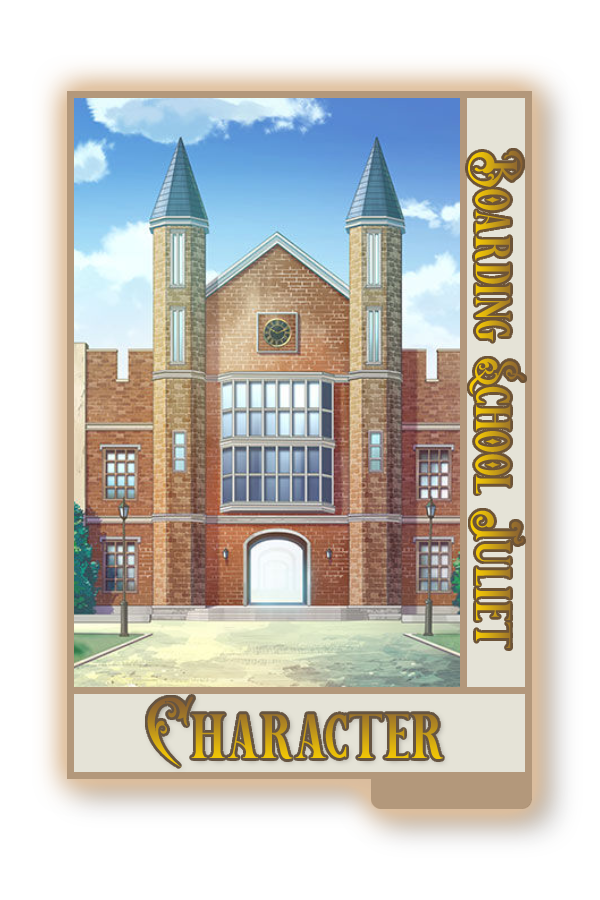
<style>
.page{position:relative;width:600px;height:900px;background:#ffffff}
.page>*{position:absolute;margin:0}
.t1{font:58.9px "VictorianDecadeDemoVersion"}
.t2{font:75px "VictorianDecadeDemoVersion"}
</style>
<div class="page">
<p class="t1" style="left:468px;top:150px;width:57px;height:498px;rotate:90deg">Boarding School Juliet</p>
<p class="t2" style="left:144px;top:696px;width:300px;height:72px">Character</p>
</div>
